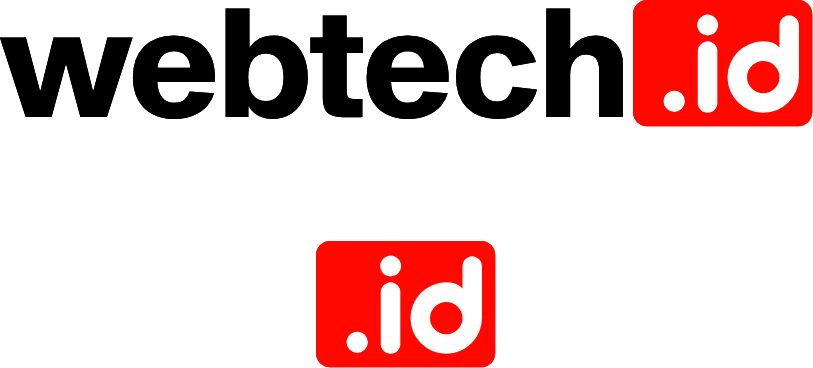
<style>
.page{position:relative;width:813px;height:368px;background:#ffffff}
.page>*{position:absolute;margin:0}
.t1{font:150px "SequelSans-BoldHead";letter-spacing:-0.005em;color:#000000}
.t2{font:150px "AristaProAlternate-Bold";letter-spacing:-0.005em;color:#ffffff}
.t3{font:150px "YaroCut-Bold";letter-spacing:-0.005em;color:#ffffff}
</style>
<div class="page">
<p class="t1" style="left:0px;top:8px;width:623px;height:111px">webtech</p>
<p class="t1" style="left:0px;top:8px;width:623px;height:111px">webtech</p>
<p class="t2" style="left:663px;top:14px;width:136px;height:99px"><span class="t3">.</span>id</p>
<p class="t2" style="left:663px;top:14px;width:136px;height:99px"><span class="t3">.</span>id</p>
<p class="t2" style="left:346px;top:255px;width:136px;height:99px"><span class="t3">.</span>id</p>
<p class="t2" style="left:346px;top:255px;width:136px;height:99px"><span class="t3">.</span>id</p>
</div>
